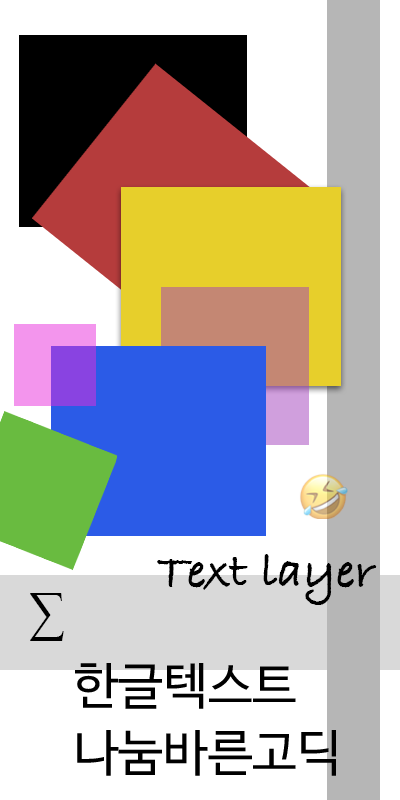
<style>
.page{position:relative;width:400px;height:800px;background:#ffffff}
.page>*{position:absolute;margin:0}
.t1{font:12px "BradleyHandITCTT-Bold";color:#000000}
.t2{font:12px "Arial-Black";color:#000000}
.t3{font:12px/66.7px "NanumBarunGothicOTF";color:#000000}
</style>
<div class="page">
<p class="t1" style="left:157px;top:554px;width:220px;height:51px">Text layer</p>
<p class="t2" style="left:30px;top:593px;width:34px;height:48px">∑</p>
<p class="t3" style="left:75px;top:663px;width:261px;height:113px">한글텍스트<br>나눔바른고딕</p>
</div>
